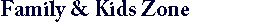
<style>
.page{position:relative;width:274px;height:28px;background:#ffffff}
.page>*{position:absolute;margin:0}
.t1{font:22px "ACaslonPro-Bold";color:#000033}
</style>
<div class="page">
<p class="t1" style="left:1px;top:0px;width:188px;height:22px">Family &amp; Kids Zone</p>
</div>
